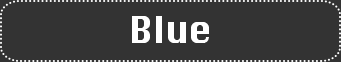
<style>
.page{position:relative;width:341px;height:62px;background:#333333}
.page>*{position:absolute;margin:0}
.t1{font:36px "Krungthep";color:#ffffff}
</style>
<div class="page">
<p class="t1" style="left:132px;top:16px;width:77px;height:27px">Blue</p>
</div>
